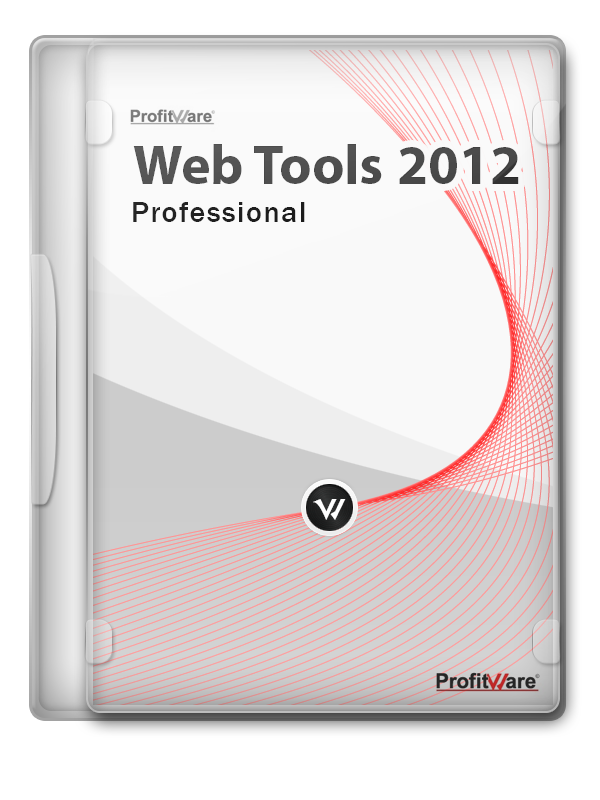
<style>
.page{position:relative;width:600px;height:800px}
.page>*{position:absolute;margin:0}
.t1{font:56px "MyriadPro-Bold";color:#535353}
.t2{font:30px "FranklinGothic-Medium";letter-spacing:0.05em;color:#202020}
</style>
<div class="page">
<p class="t1" style="left:133px;top:144px;width:249px;height:40px">Web Tools</p>
<p class="t1" style="left:399px;top:147px;width:120px;height:37px">2012</p>
<p class="t2" style="left:133px;top:202px;width:172px;height:20px">Professional</p>
</div>
